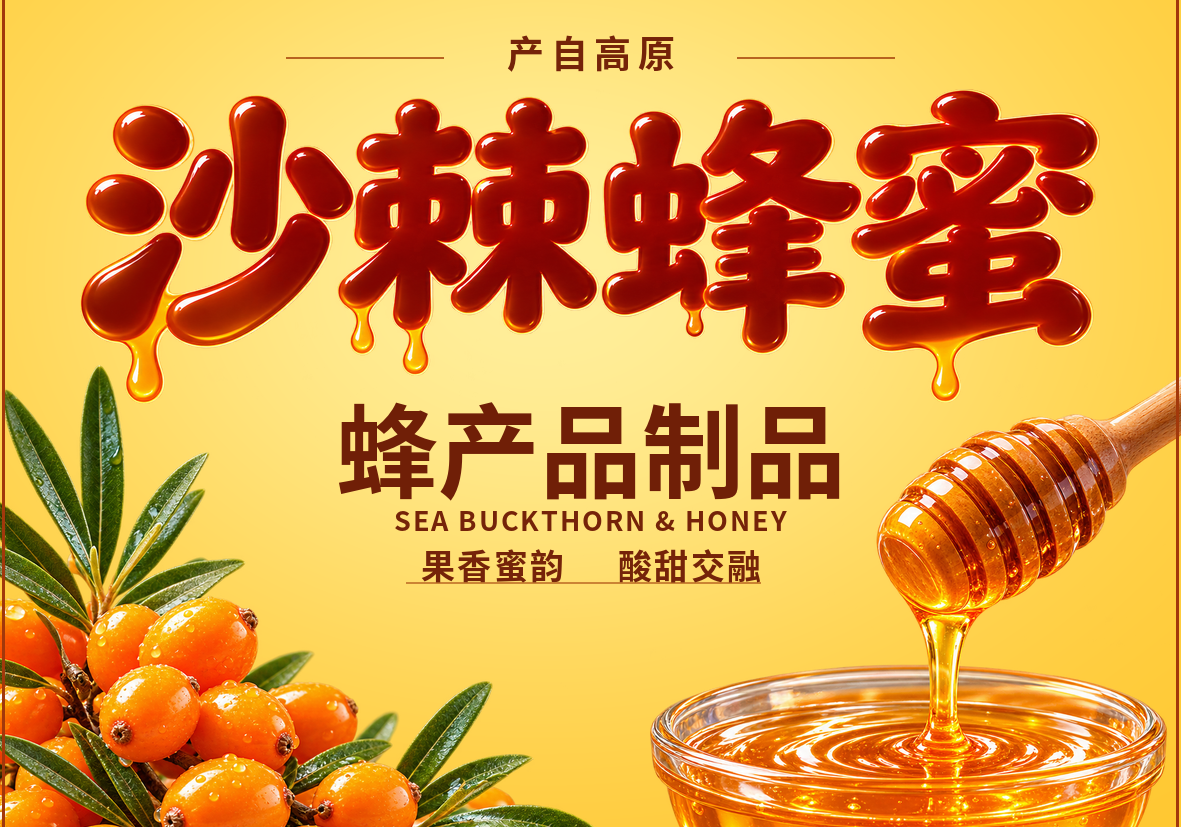
<style>
.page{position:relative;width:1181px;height:827px}
.page>*{position:absolute;margin:0}
.t1{font:37px "NotoSansCJKsc-Bold";letter-spacing:0.18em;color:#752309}
.t2{font:102px "NotoSansCJKsc-Bold";color:#701f07}
.t3{font:27px "NotoSansCJKsc-Bold";letter-spacing:0.07em;color:#752309}
.t4{font:34px "NotoSansCJKsc-Bold";letter-spacing:0.07em;color:#752309}
</style>
<div class="page">
<p class="t1" style="left:502px;top:30px;width:178px;height:47px">产自高原</p>
<p class="t2" style="left:331px;top:397px;width:520px;height:109px">蜂产品制品</p>
<p class="t3" style="left:389px;top:506px;width:403px;height:30px">SEA BUCKTHORN &amp; HONEY</p>
<p class="t4" style="left:416px;top:544px;width:154px;height:44px">果香蜜韵</p>
<p class="t4" style="left:613px;top:544px;width:154px;height:44px">酸甜交融</p>
</div>
